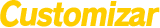
<style>
.page{position:relative;width:160px;height:28px;background:#ffffff}
.page>*{position:absolute;margin:0}
.t1{font:32px "RodinPro-EB";letter-spacing:-0.057em;color:#fecd00;font-style:italic;scale:0.92 1}
</style>
<div class="page">
<p class="t1" style="left:0px;top:0px;width:160px;height:27px">Customizar</p>
</div>
